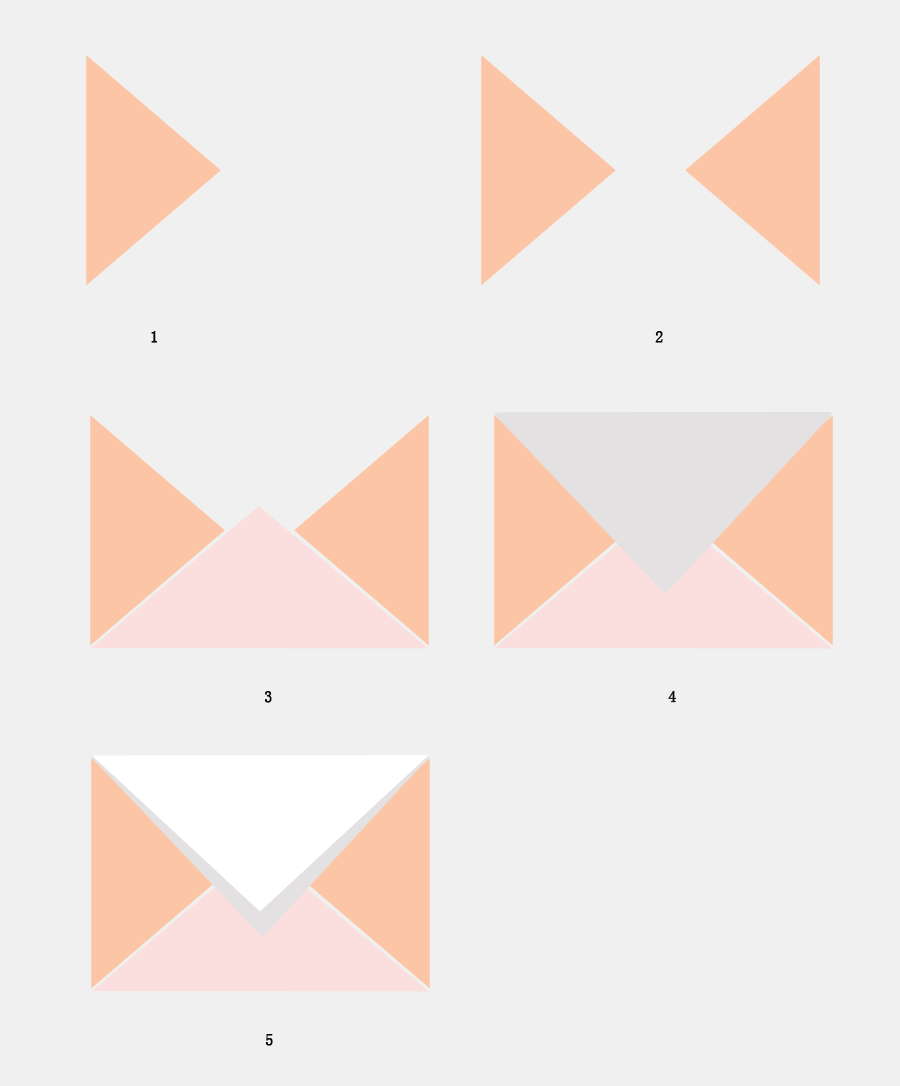
<style>
.page{position:relative;width:900px;height:1086px;background:#f0f0f0}
.page>*{position:absolute;margin:0}
.t1{font:16px "SimSun";color:#010909;font-weight:bold}
</style>
<div class="page">
<p class="t1" style="left:151px;top:331px;width:6px;height:12px">1</p>
<p class="t1" style="left:655px;top:331px;width:8px;height:12px">2</p>
<p class="t1" style="left:264px;top:691px;width:8px;height:12px">3</p>
<p class="t1" style="left:668px;top:690px;width:9px;height:13px">4</p>
<p class="t1" style="left:265px;top:1034px;width:8px;height:12px">5</p>
</div>
